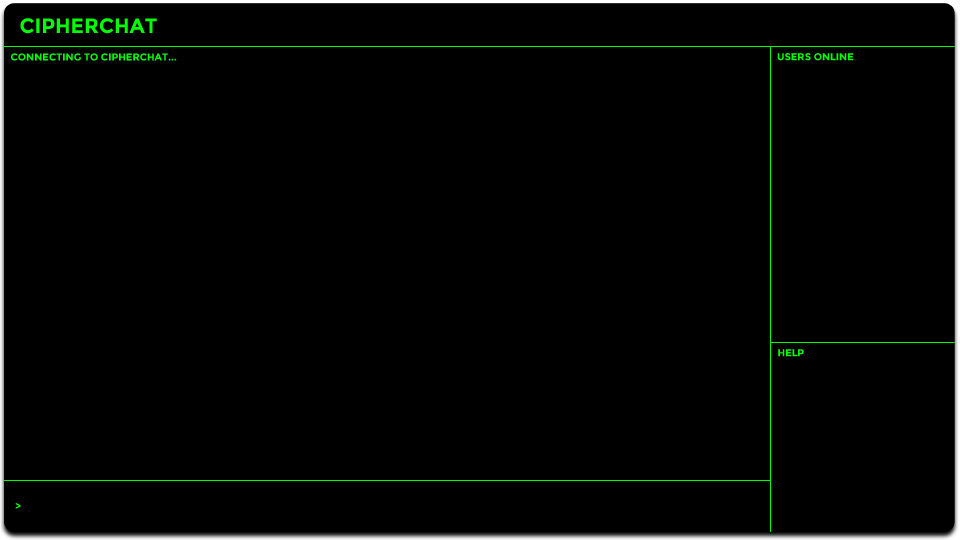
<style>
.page{position:relative;width:960px;height:540px;background:#000000}
.page>*{position:absolute;margin:0}
.t1{font:20.7px "Montserrat-Bold";color:#00ff00}
.t2{font:10px "Montserrat-Bold";color:#00ff00}
</style>
<div class="page">
<p class="t1" style="left:20px;top:18px;width:137px;height:16px">CIPHERCHAT</p>
<p class="t2" style="left:11px;top:53px;width:166px;height:8px">CONNECTING TO CIPHERCHAT...</p>
<p class="t2" style="left:777px;top:53px;width:77px;height:8px">USERS ONLINE</p>
<p class="t2" style="left:778px;top:349px;width:26px;height:8px">HELP</p>
<p class="t2" style="left:15px;top:502px;width:6px;height:7px">&gt;</p>
</div>
